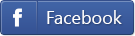
<style>
.page{position:relative;width:135px;height:36px}
.page>*{position:absolute;margin:0}
.t1{font:18px "SegoeUI";color:#ffffff}
</style>
<div class="page">
<p class="t1" style="left:47px;top:10px;width:75px;height:14px">Facebook</p>
</div>
